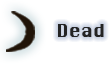
<style>
.page{position:relative;width:111px;height:66px;background:#ffffff}
.page>*{position:absolute;margin:0}
.t1{font:17.4px "Krungthep";letter-spacing:0.01em;color:#242424;scale:1.03 1}
</style>
<div class="page">
<p class="t1" style="left:58px;top:24px;width:46px;height:13px">Dead</p>
</div>
